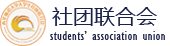
<style>
.page{position:relative;width:170px;height:46px;background:#ffffff}
.page>*{position:absolute;margin:0}
.t1{font:21px "MicrosoftYaHei";color:#1a2048}
.t2{font:13px "GillSansMT-Condensed";letter-spacing:0.04em;color:#1a2048}
</style>
<div class="page">
<p class="t1" style="left:52px;top:7px;width:105px;height:19px">社团联合会</p>
<p class="t2" style="left:50px;top:31px;width:115px;height:9px">students’ association union</p>
</div>
